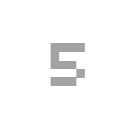
<style>
.page{position:relative;width:128px;height:128px;background:#ffffff}
.page>*{position:absolute;margin:0}
.t1{font:72px "Silkscreen";color:#a3a3a3}
</style>
<div class="page">
<p class="t1" style="left:50px;top:43px;width:35px;height:43px">5</p>
</div>
